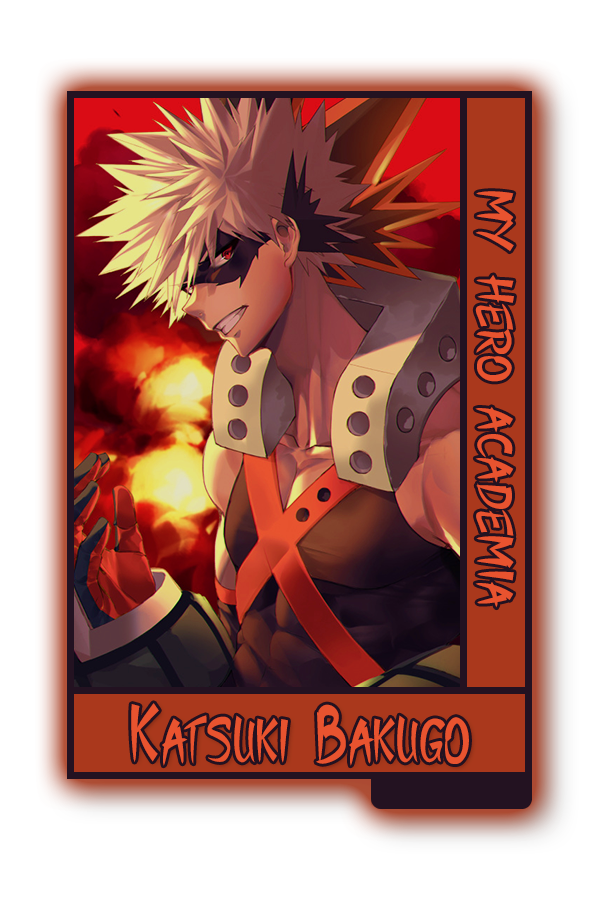
<style>
.page{position:relative;width:600px;height:900px;background:#ffffff}
.page>*{position:absolute;margin:0}
.t1{font:48.8px "Moyko";color:#e8532f}
.t2{font:80.6px "Moyko";color:#e8532f;scale:0.7 1}
</style>
<div class="page">
<p class="t1" style="left:475px;top:191px;width:39px;height:417px;rotate:90deg">MY HERO ACADEMIA</p>
<p class="t2" style="left:131px;top:703px;width:338px;height:63px">Katsuki Bakugo</p>
</div>
